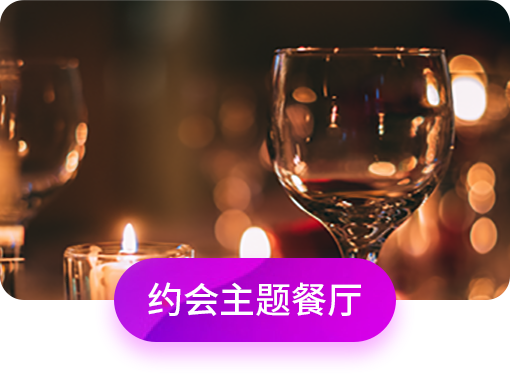
<style>
.page{position:relative;width:510px;height:390px}
.page>*{position:absolute;margin:0}
.t1{font:36px "SourceHanSansCN-Medium";color:#ffffff}
</style>
<div class="page">
<p class="t1" style="left:148px;top:282px;width:213px;height:34px">约会主题餐厅</p>
</div>
